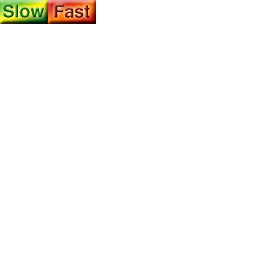
<style>
.page{position:relative;width:256px;height:256px;background:#ffffff}
.page>*{position:absolute;margin:0}
.t1{font:18px "Helvetica-Bold"}
</style>
<div class="page">
<p class="t1" style="left:3px;top:4px;width:41px;height:14px">Slow</p>
<p class="t1" style="left:54px;top:4px;width:36px;height:14px">Fast</p>
</div>
